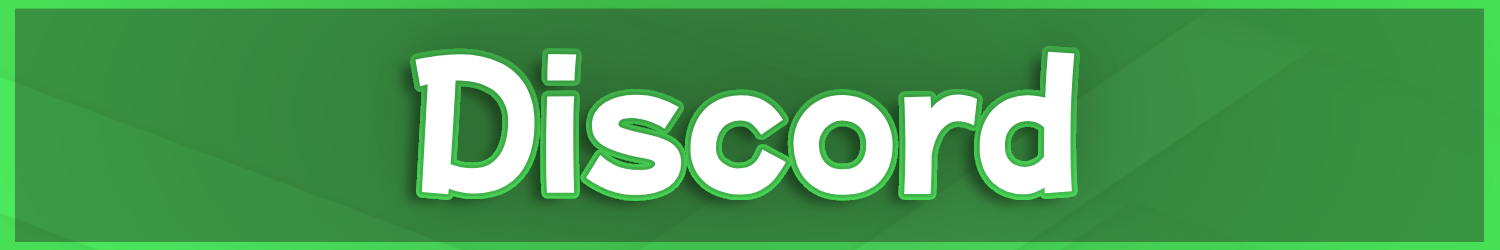
<style>
.page{position:relative;width:1500px;height:250px}
.page>*{position:absolute;margin:0}
.t1{font:156.8px "MochiyPopOne-Regular";color:#ffffff}
</style>
<div class="page">
<p class="t1" style="left:415px;top:51px;width:660px;height:144px">Discord</p>
</div>
